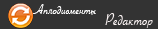
<style>
.page{position:relative;width:158px;height:29px;background:#333333}
.page>*{position:absolute;margin:0}
.t1{font:15px "SavoyeLetPlain";color:#ffffff}
.t2{font:18px "SavoyeLetPlain";color:#faf3f3}
</style>
<div class="page">
<p class="t1" style="left:32px;top:4px;width:64px;height:11px">Аплодисменты</p>
<p class="t2" style="left:105px;top:13px;width:48px;height:15px">Редактор</p>
</div>
